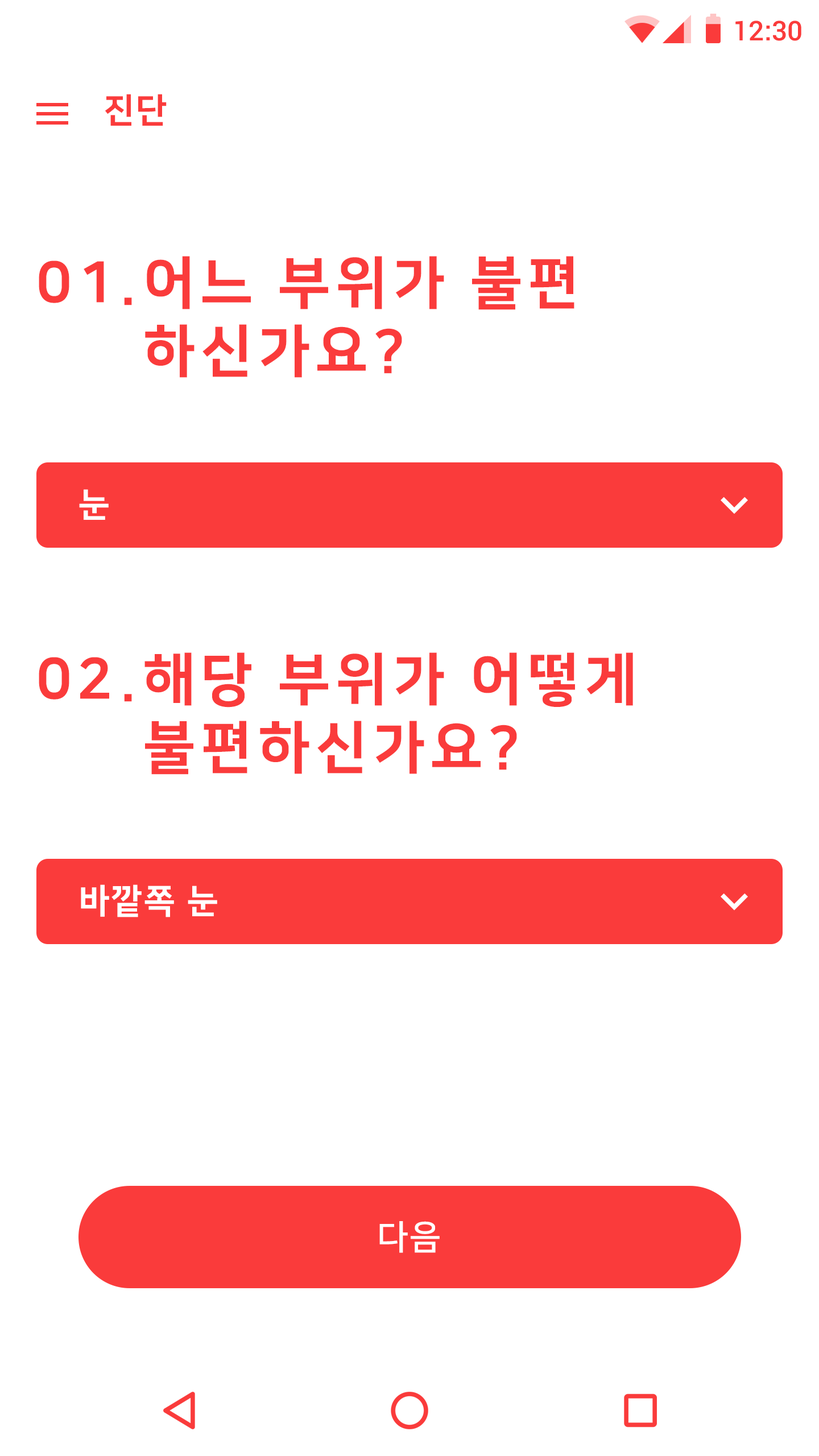
<style>
.page{position:relative;width:819px;height:1456px;background:#ffffff}
.page>*{position:absolute;margin:0}
.t1{font:27.3px "Roboto-Medium";color:#fa3b3b}
.t2{font:34.1px "NanumSquareEB";letter-spacing:0.05em;color:#fa3b3b}
.t3{font:56.9px "NanumSquareEB";letter-spacing:0.1em;color:#fa3b3b}
.t4{font:34.1px "NanumSquareEB";letter-spacing:0.05em;color:#ffffff}
.t5{font:34.1px "NanumSquareB";letter-spacing:0.05em;color:#ffffff}
</style>
<div class="page">
<p class="t1" style="left:735px;top:20px;width:66px;height:21px">12:30</p>
<p class="t2" style="left:105px;top:94px;width:62px;height:32px">진단</p>
<p class="t3" style="left:145px;top:256px;width:429px;height:122px">어느 부위가 불편<br>하신가요?</p>
<p class="t3" style="left:39px;top:260px;width:93px;height:45px">01.</p>
<p class="t4" style="left:79px;top:489px;width:30px;height:31px">눈</p>
<p class="t3" style="left:144px;top:652px;width:489px;height:123px">해당 부위가 어떻게<br>불편하신가요?</p>
<p class="t3" style="left:39px;top:657px;width:93px;height:45px">02.</p>
<p class="t4" style="left:81px;top:884px;width:136px;height:33px">바깥쪽 눈</p>
<p class="t5" style="left:379px;top:1221px;width:61px;height:32px">다음</p>
</div>
